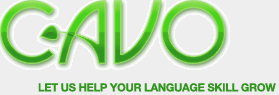
<style>
.page{position:relative;width:279px;height:95px;background:#eeeeee}
.page>*{position:absolute;margin:0}
.t1{font:11px "HelveticaNeueCE-Bold";letter-spacing:-0.015em;color:#329620}
</style>
<div class="page">
<p class="t1" style="left:38px;top:83px;width:238px;height:9px">LET US HELP YOUR LANGUAGE SKILL GROW</p>
</div>
